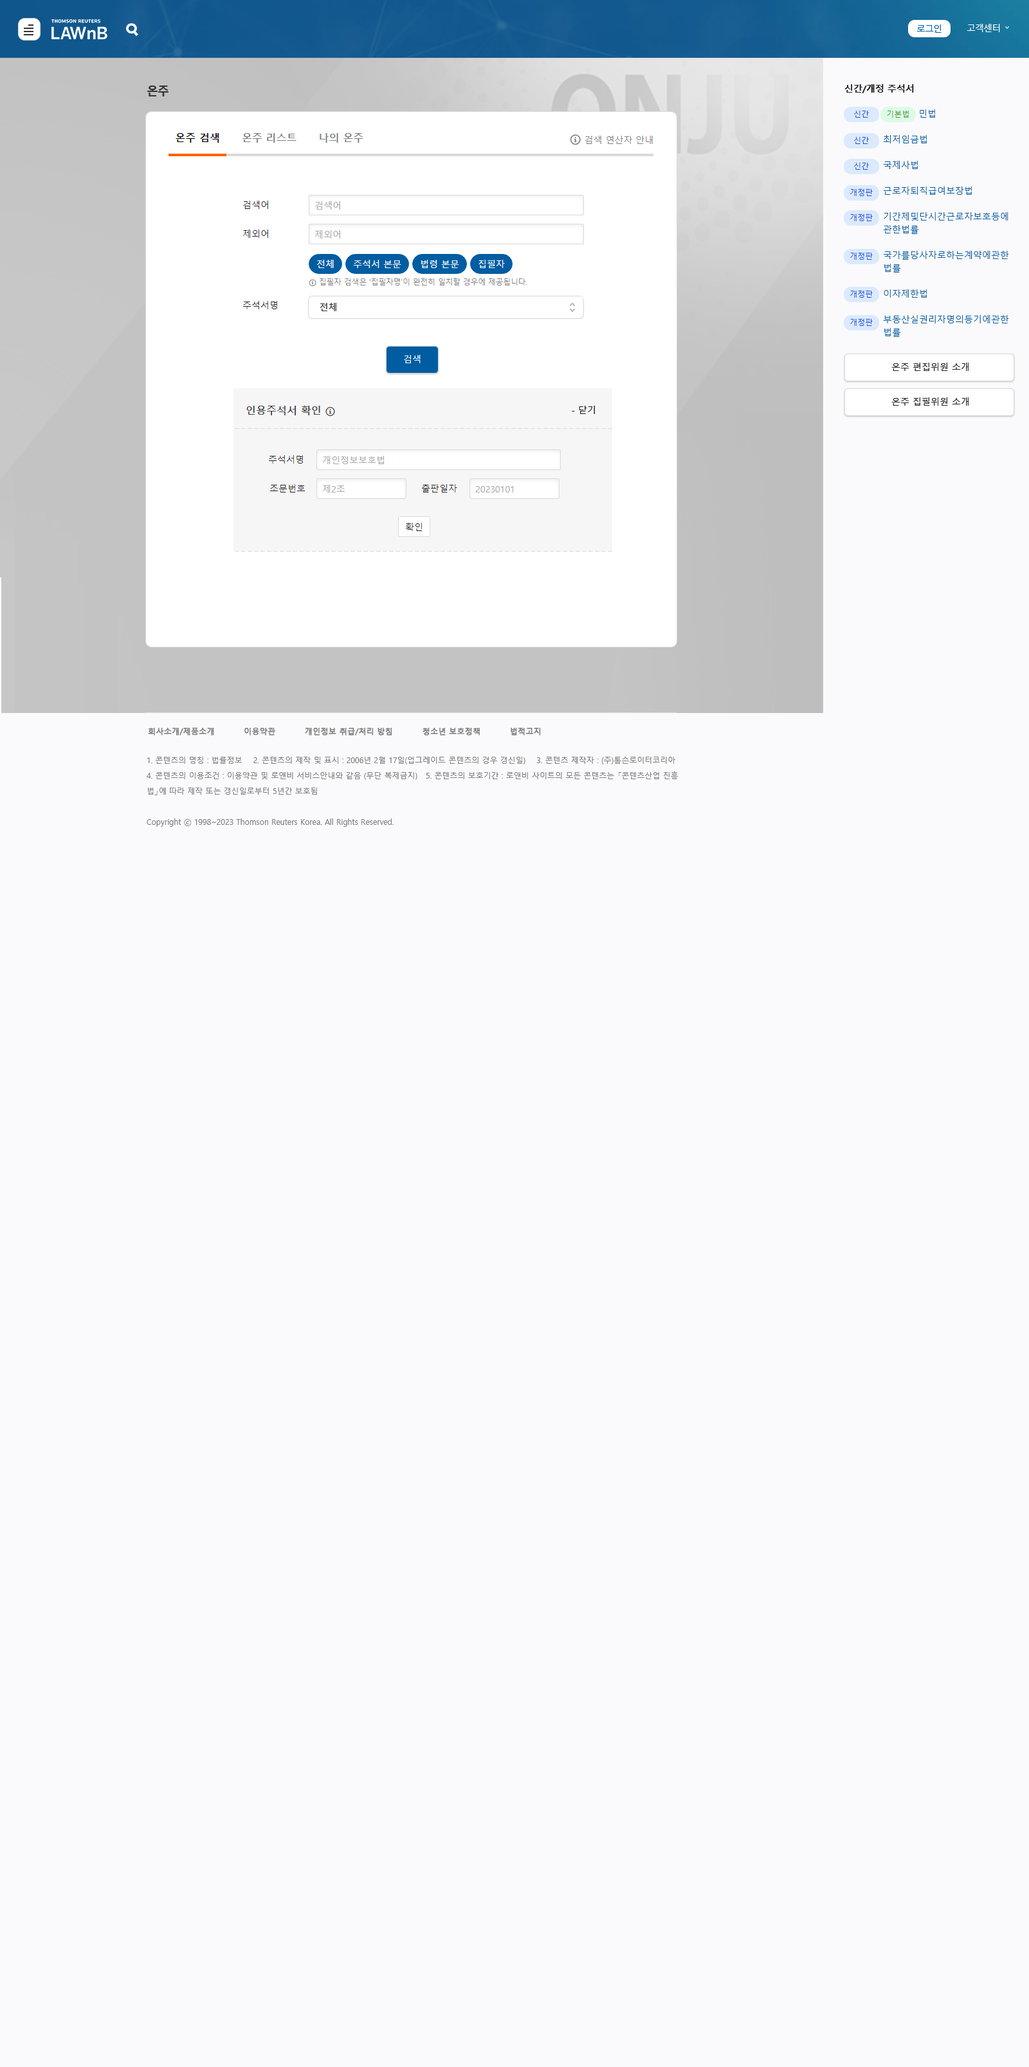
<style>
.page{position:relative;width:1029px;height:2067px;background:#fafafc}
.page>*{position:absolute;margin:0}
.t1{font:11.6px "MalgunGothicBold";letter-spacing:-0.06em;color:#333333}
.t2{font:9px "MalgunGothicBold";color:#212121}
.t3{font:9px/12.9px "MalgunGothic";color:#005da2}
.t4{font:9px "MalgunGothic";color:#333333}
.t5{font:9px "MalgunGothic";color:#ffffff}
.t6{font:9px "MalgunGothic";color:#212121}
.t7{font:7.7px "MalgunGothic";color:#7f7f7f;font-weight:bold}
.t8{font:7.7px/15.4px "MalgunGothic";color:#7f7f7f}
</style>
<div class="page">
<p class="t1" style="left:147px;top:86px;width:21px;height:10px">온주</p>
<p class="t2" style="left:845px;top:84px;width:69px;height:9px">신간/개정 주석서</p>
<p class="t3" style="left:883px;top:109px;width:126px;height:228px">민법<br><br>최저임금법<br><br>국제사법<br><br>근로자퇴직급여보장법<br><br>기간제및단시간근로자보호등에관한법률<br><br>국가를당사자로하는계약에관한법률<br><br>이자제한법<br><br>부동산실권리자명의등기에관한법률</p>
<p class="t4" style="left:320px;top:303px;width:16px;height:8px">전체</p>
<p class="t5" style="left:404px;top:355px;width:16px;height:8px">검색</p>
<p class="t6" style="left:891px;top:363px;width:77px;height:8px">온주 편집위원 소개</p>
<p class="t6" style="left:891px;top:397px;width:77px;height:9px">온주 집필위원 소개</p>
<p class="t6" style="left:572px;top:406px;width:23px;height:8px">- 닫기</p>
<p class="t7" style="left:148px;top:727px;width:393px;height:8px">회사소개/제품소개          이용약관          개인정보 취급/처리 방침          청소년 보호정책          법적고지</p>
<p class="t8" style="left:147px;top:757px;width:531px;height:70px">1. 콘텐츠의 명칭 : 법률정보    2. 콘텐츠의 제작 및 표시 : 2006년 2월 17일(업그레이드 콘텐츠의 경우 갱신일)    3. 콘텐츠 제작자 : (주)톰슨로이터코리아    <br>4. 콘텐츠의 이용조건 : 이용약관 및 로앤비 서비스안내와 같음 (무단 복제금지)   5. 콘텐츠의 보호기간 : 로앤비 사이트의 모든 콘텐츠는 「콘텐츠산업 진흥<br>법」에 따라 제작 또는 갱신일로부터 5년간 보호됨<br><br>Copyright ⓒ 1998~2023 Thomson Reuters Korea. All Rights Reserved.</p>
</div>
